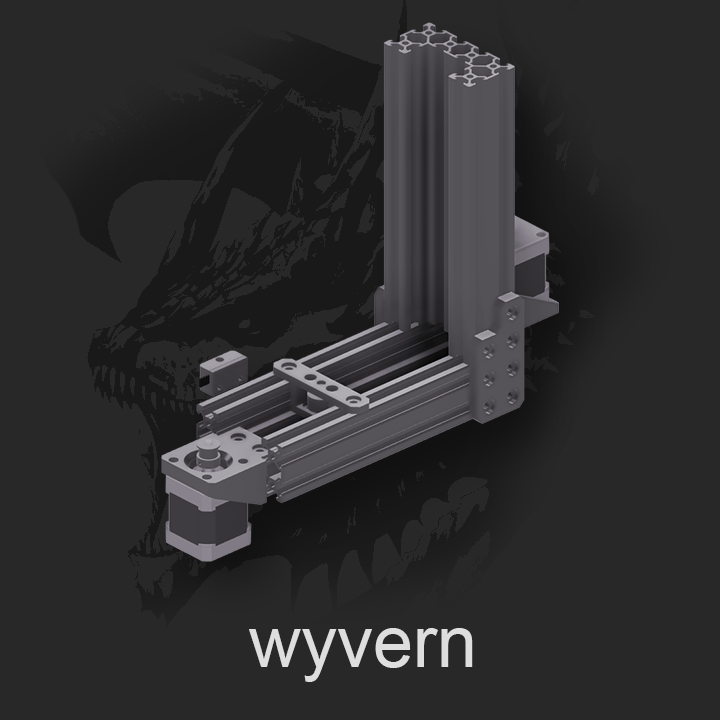
<style>
.page{position:relative;width:720px;height:720px;background:#282828}
.page>*{position:absolute;margin:0}
.t1{font:72px "ArialMT";color:#dedede}
</style>
<div class="page">
<p class="t1" style="left:249px;top:628px;width:224px;height:54px">wyvern</p>
</div>
